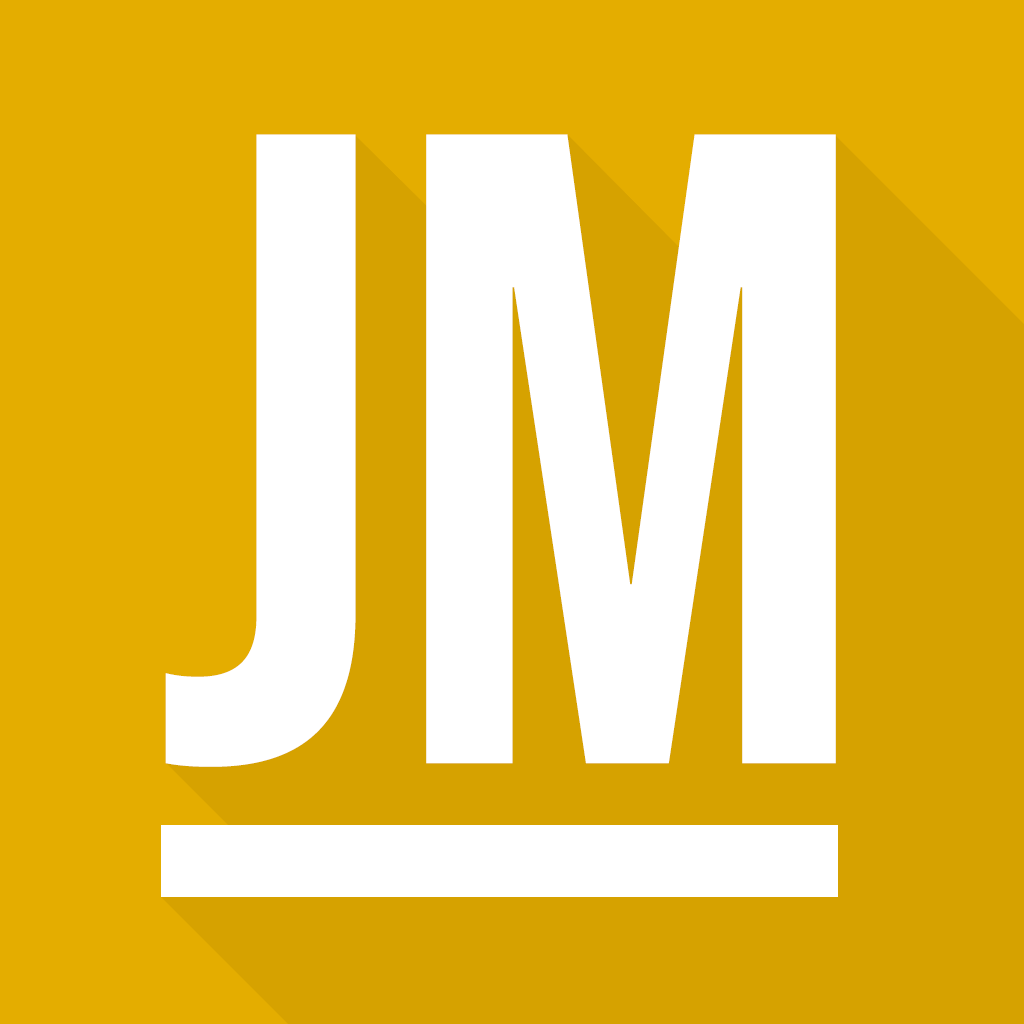
<style>
.page{position:relative;width:1024px;height:1024px;background:#d6a200}
.page>*{position:absolute;margin:0}
.t1{font:897.8px "BebasNeue-Regular";color:#ffffff}
</style>
<div class="page">
<p class="t1" style="left:165px;top:134px;width:671px;height:633px">JM</p>
</div>
